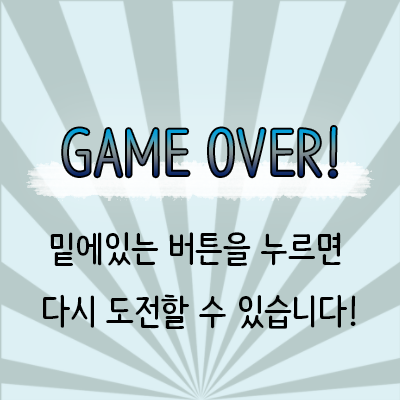
<style>
.page{position:relative;width:400px;height:400px;background:#ddf0f4}
.page>*{position:absolute;margin:0}
.t1{font:60px "NanumBarunpenOTF"}
.t2{font:36px "NanumBarunpenOTF-Bold";color:#000000}
</style>
<div class="page">
<p class="t1" style="left:63px;top:127px;width:274px;height:50px">GAME OVER!</p>
<p class="t2" style="left:43px;top:232px;width:313px;height:97px;text-align:center">밑에있는 버튼을 누르면 <br>다시 도전할 수 있습니다!</p>
</div>
